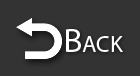
<style>
.page{position:relative;width:140px;height:76px;background:#333333}
.page>*{position:absolute;margin:0}
.t1{font:33.3px "MyriadPro-Regular";letter-spacing:0.01em;color:#ffffff;font-variant:small-caps}
</style>
<div class="page">
<p class="t1" style="left:66px;top:29px;width:57px;height:23px">Back</p>
</div>
